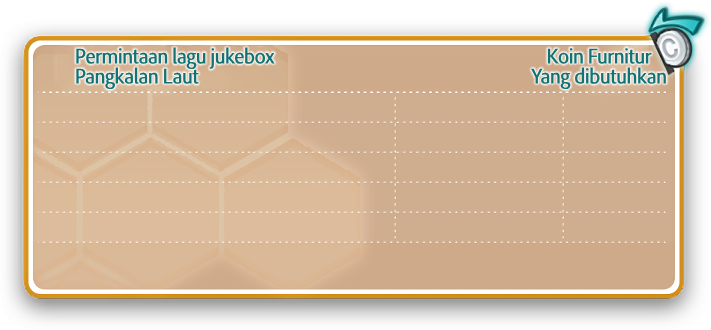
<style>
.page{position:relative;width:711px;height:330px}
.page>*{position:absolute;margin:0}
.t1{font:22px/20px "AdobeClean-Regular";letter-spacing:-0.04em;color:#137273;font-weight:bold;scale:0.9 1}
</style>
<div class="page">
<p class="t1" style="left:76px;top:47px;width:199px;height:43px">Permintaan lagu jukebox<br>Pangkalan Laut</p>
<p class="t1" style="left:531px;top:48px;width:135px;height:42px;text-align:center">Koin Furnitur<br>Yang dibutuhkan</p>
</div>
